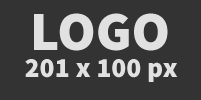
<style>
.page{position:relative;width:201px;height:100px;background:#333333}
.page>*{position:absolute;margin:0}
.t1{font:55.6px "SourceSansPro-Black";color:#e1e1e1}
.t2{font:27.8px "SourceSansPro-Black";color:#e1e1e1}
</style>
<div class="page">
<p class="t1" style="left:34px;top:13px;width:134px;height:38px">LOGO</p>
<p class="t2" style="left:25px;top:59px;width:153px;height:23px">201 x 100 px</p>
</div>
